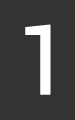
<style>
.page{position:relative;width:75px;height:120px;background:#333333}
.page>*{position:absolute;margin:0}
.t1{font:96px "Roboto-Regular";letter-spacing:-0.02em;color:#ffffff;font-weight:bold}
</style>
<div class="page">
<p class="t1" style="left:25px;top:24px;width:26px;height:71px">1</p>
</div>
